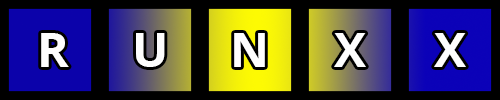
<style>
.page{position:relative;width:500px;height:100px;background:#000000}
.page>*{position:absolute;margin:0}
.t1{font:48px "OpenSans-Bold";color:#fefefe}
</style>
<div class="page">
<p class="t1" style="left:41px;top:33px;width:28px;height:34px">R</p>
<p class="t1" style="left:136px;top:33px;width:29px;height:34px">U</p>
<p class="t1" style="left:234px;top:33px;width:31px;height:34px">N</p>
<p class="t1" style="left:334px;top:33px;width:32px;height:34px">X</p>
<p class="t1" style="left:434px;top:33px;width:32px;height:34px">X</p>
</div>
